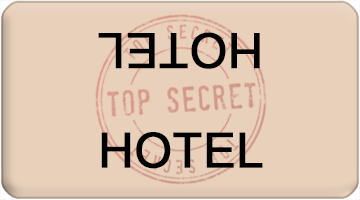
<style>
.page{position:relative;width:360px;height:200px;background:#e8d0bb}
.page>*{position:absolute;margin:0}
.t1{font:48px "ArialMT";color:#000000;font-weight:bold}
</style>
<div class="page">
<p class="t1" style="left:98px;top:32px;width:162px;height:37px;rotate:180deg">HOTEL</p>
<p class="t1" style="left:101px;top:132px;width:162px;height:37px">HOTEL</p>
</div>
